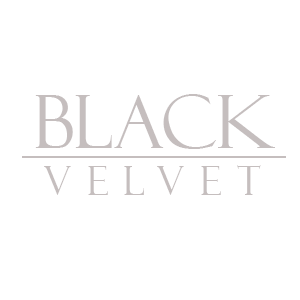
<style>
.page{position:relative;width:300px;height:300px;background:#ffffff}
.page>*{position:absolute;margin:0}
.t1{font:73.5px "FelixTitlingMT";color:#c5bebe}
.t2{font:40px "FelixTitlingMT";letter-spacing:0.4em;color:#c5bebe}
</style>
<div class="page">
<p class="t1" style="left:35px;top:94px;width:240px;height:55px">BLACK</p>
<p class="t2" style="left:44px;top:165px;width:217px;height:30px">VELVET</p>
</div>
